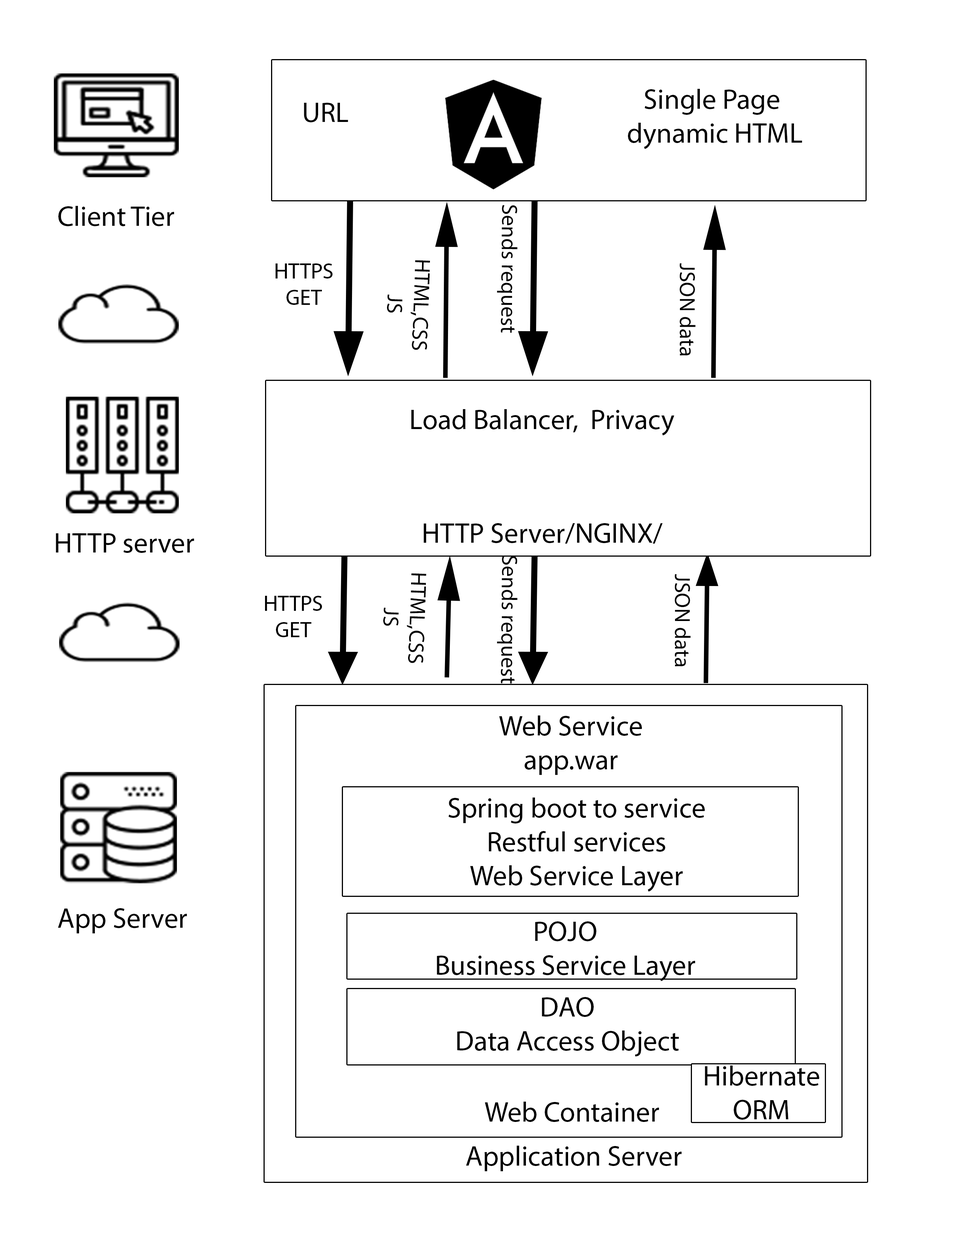
<style>
.page{position:relative;width:960px;height:1242px;background:#ffffff}
.page>*{position:absolute;margin:0}
.t1{font:28.2px "MyriadPro-Regular";color:#000000}
.t2{font:22px "MyriadPro-Regular";color:#000000}
</style>
<div class="page">
<p class="t1" style="left:628px;top:89px;width:174px;height:60px;text-align:center">Single Page <br>dynamic HTML</p>
<p class="t1" style="left:304px;top:103px;width:44px;height:19px">URL</p>
<p class="t1" style="left:58px;top:206px;width:116px;height:20px">Client Tier</p>
<p class="t2" style="left:497px;top:205px;width:21px;height:128px;rotate:90deg">Sends request</p>
<p class="t2" style="left:276px;top:264px;width:57px;height:41px;text-align:center">HTTPS<br>GET</p>
<p class="t2" style="left:387px;top:260px;width:43px;height:90px;text-align:center;rotate:92deg">HTML,CSS<br>JS</p>
<p class="t2" style="left:679px;top:263px;width:17px;height:93px;rotate:90deg">JSON data</p>
<p class="t1" style="left:411px;top:409px;width:263px;height:27px">Load Balancer,  Privacy</p>
<p class="t1" style="left:56px;top:533px;width:138px;height:20px">HTTP server</p>
<p class="t1" style="left:423px;top:523px;width:240px;height:21px">HTTP Server/NGINX/</p>
<p class="t2" style="left:497px;top:556px;width:21px;height:128px;rotate:90deg">Sends request</p>
<p class="t2" style="left:383px;top:573px;width:44px;height:90px;text-align:center;rotate:92deg">HTML,CSS<br>JS</p>
<p class="t2" style="left:675px;top:574px;width:16px;height:93px;rotate:90deg">JSON data</p>
<p class="t2" style="left:265px;top:596px;width:57px;height:41px;text-align:center">HTTPS<br>GET</p>
<p class="t1" style="left:499px;top:716px;width:143px;height:59px;text-align:center">Web Service<br>app.war</p>
<p class="t1" style="left:448px;top:798px;width:257px;height:94px;text-align:center">Spring boot to service<br>Restful services<br>Web Service Layer</p>
<p class="t1" style="left:58px;top:908px;width:129px;height:26px">App Server</p>
<p class="t1" style="left:437px;top:922px;width:258px;height:59px;text-align:center">POJO<br>Business Service Layer</p>
<p class="t1" style="left:457px;top:997px;width:222px;height:60px;text-align:center">DAO<br>Data Access Object</p>
<p class="t1" style="left:705px;top:1066px;width:114px;height:54px;text-align:center">Hibernate<br>ORM</p>
<p class="t1" style="left:485px;top:1102px;width:174px;height:20px">Web Container</p>
<p class="t1" style="left:466px;top:1146px;width:216px;height:25px">Application Server</p>
</div>
